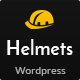
<style>
.page{position:relative;width:80px;height:80px}
.page>*{position:absolute;margin:0}
.t1{font:19px "JosefinSans-Bold";letter-spacing:0.02em;color:#ffffff}
.t2{font:10px "Lato-Regular";letter-spacing:0.02em;color:#acacac}
</style>
<div class="page">
<p class="t1" style="left:7px;top:39px;width:66px;height:16px">Helmets</p>
<p class="t2" style="left:15px;top:67px;width:51px;height:9px">Wordpress</p>
</div>
